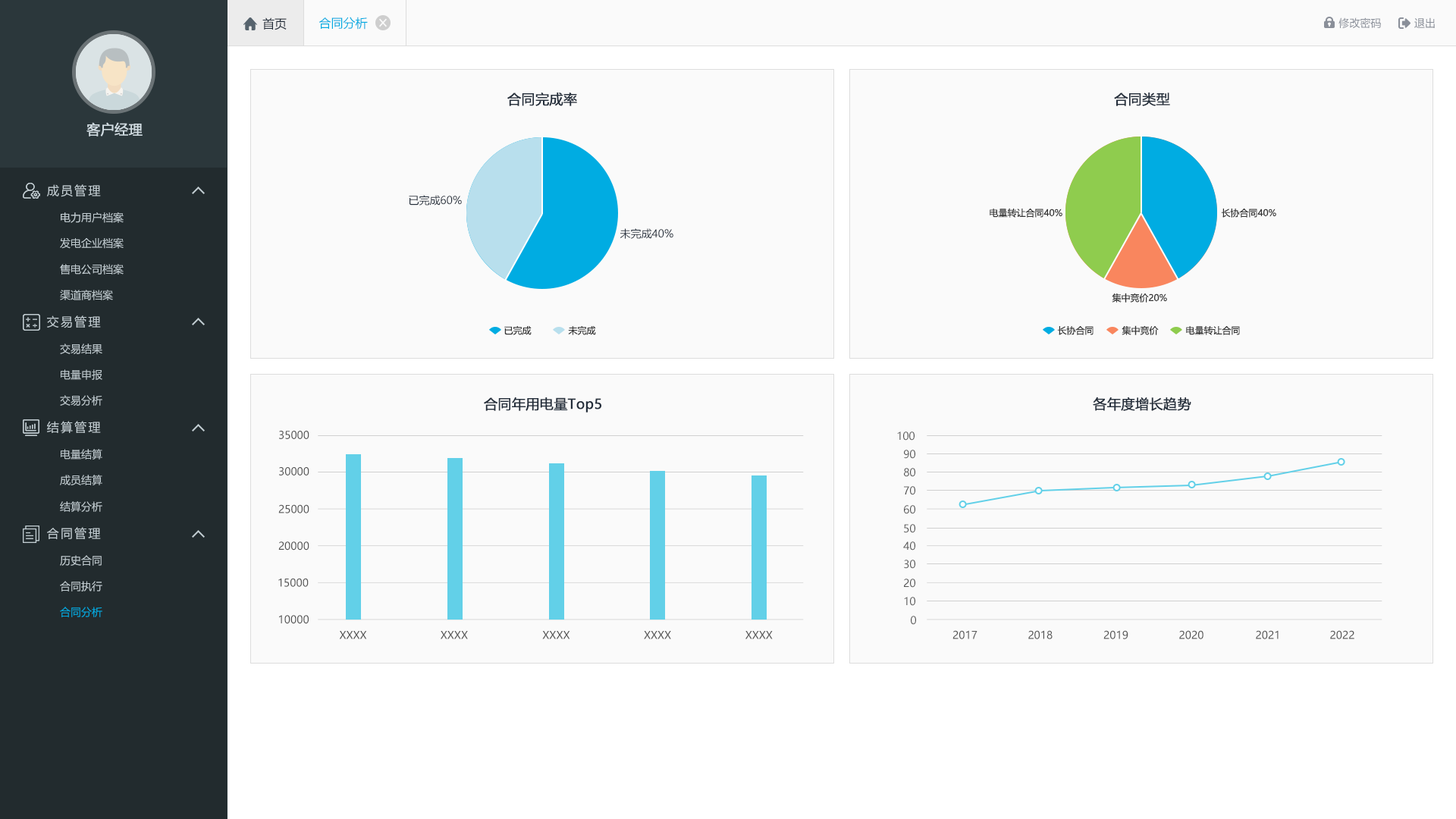
<style>
.page{position:relative;width:1456px;height:819px;background:#fafafa}
.page>*{position:absolute;margin:0}
.t1{font:12.1px "MicrosoftYaHei";color:#242e3b}
.t2{font:12.1px "MicrosoftYaHei";color:#00ace2}
.t3{font:10.6px "MicrosoftYaHei";color:#8a8f99}
.t4{font:13.6px "MicrosoftYaHei";color:#242e3b;font-weight:bold}
.t5{font:13.6px "MicrosoftYaHei";color:#d1dce2;font-weight:bold}
.t6{font:12.1px "MicrosoftYaHei";letter-spacing:0.14em;color:#c2cdd2}
.t7{font:10.6px "MicrosoftYaHei";color:#242e3b}
.t8{font:9.1px "MicrosoftYaHei";color:#333333}
.t9{font:10.6px "MicrosoftYaHei";color:#c2cdd2}
.t10{font:10.6px "MicrosoftYaHei";color:#555555}
.t11{font:10.6px "MicrosoftYaHei";color:#00ace2}
</style>
<div class="page">
<p class="t1" style="left:262px;top:17px;width:25px;height:13px">首页</p>
<p class="t2" style="left:318px;top:17px;width:50px;height:13px">合同分析</p>
<p class="t3" style="left:1338px;top:17px;width:43px;height:12px">修改密码</p>
<p class="t3" style="left:1414px;top:17px;width:21px;height:11px">退出</p>
<p class="t4" style="left:507px;top:93px;width:70px;height:13px">合同完成率</p>
<p class="t4" style="left:1114px;top:93px;width:56px;height:13px">合同类型</p>
<p class="t5" style="left:86px;top:122px;width:57px;height:14px">客户经理</p>
<p class="t6" style="left:47px;top:184px;width:54px;height:13px">成员管理</p>
<p class="t7" style="left:409px;top:195px;width:53px;height:11px">已完成60%</p>
<p class="t8" style="left:990px;top:208px;width:72px;height:10px">电量转让合同40%</p>
<p class="t8" style="left:1221px;top:209px;width:55px;height:9px">长协合同40%</p>
<p class="t9" style="left:61px;top:212px;width:63px;height:11px">电力用户档案</p>
<p class="t7" style="left:620px;top:228px;width:53px;height:11px">未完成40%</p>
<p class="t9" style="left:60px;top:237px;width:64px;height:12px">发电企业档案</p>
<p class="t9" style="left:60px;top:264px;width:64px;height:11px">售电公司档案</p>
<p class="t9" style="left:60px;top:290px;width:53px;height:10px">渠道商档案</p>
<p class="t8" style="left:1112px;top:293px;width:55px;height:10px">集中竞价20%</p>
<p class="t6" style="left:47px;top:315px;width:54px;height:13px">交易管理</p>
<p class="t8" style="left:504px;top:325px;width:28px;height:10px">已完成</p>
<p class="t8" style="left:568px;top:325px;width:28px;height:10px">未完成</p>
<p class="t8" style="left:1057px;top:326px;width:37px;height:9px">长协合同</p>
<p class="t8" style="left:1122px;top:325px;width:37px;height:10px">集中竞价</p>
<p class="t8" style="left:1186px;top:325px;width:54px;height:10px">电量转让合同</p>
<p class="t9" style="left:60px;top:344px;width:42px;height:10px">交易结果</p>
<p class="t9" style="left:61px;top:369px;width:41px;height:11px">电量申报</p>
<p class="t9" style="left:60px;top:395px;width:42px;height:11px">交易分析</p>
<p class="t4" style="left:484px;top:397px;width:117px;height:16px">合同年用电量Top5</p>
<p class="t4" style="left:1093px;top:397px;width:98px;height:14px">各年度增长趋势</p>
<p class="t6" style="left:47px;top:421px;width:54px;height:13px">结算管理</p>
<p class="t10" style="left:279px;top:431px;width:30px;height:8px">35000</p>
<p class="t10" style="left:897px;top:431px;width:18px;height:10px">100</p>
<p class="t9" style="left:61px;top:449px;width:41px;height:11px">电量结算</p>
<p class="t10" style="left:904px;top:450px;width:11px;height:9px">90</p>
<p class="t10" style="left:279px;top:467px;width:30px;height:8px">30000</p>
<p class="t10" style="left:904px;top:468px;width:11px;height:9px">80</p>
<p class="t9" style="left:60px;top:475px;width:42px;height:10px">成员结算</p>
<p class="t10" style="left:904px;top:486px;width:11px;height:9px">70</p>
<p class="t9" style="left:60px;top:501px;width:42px;height:11px">结算分析</p>
<p class="t10" style="left:278px;top:504px;width:31px;height:9px">25000</p>
<p class="t10" style="left:904px;top:505px;width:11px;height:9px">60</p>
<p class="t6" style="left:47px;top:527px;width:54px;height:12px">合同管理</p>
<p class="t10" style="left:904px;top:524px;width:11px;height:9px">50</p>
<p class="t10" style="left:278px;top:541px;width:31px;height:10px">20000</p>
<p class="t10" style="left:903px;top:541px;width:12px;height:10px">40</p>
<p class="t9" style="left:60px;top:555px;width:42px;height:11px">历史合同</p>
<p class="t10" style="left:904px;top:560px;width:11px;height:9px">30</p>
<p class="t9" style="left:60px;top:581px;width:42px;height:10px">合同执行</p>
<p class="t10" style="left:278px;top:578px;width:31px;height:9px">15000</p>
<p class="t10" style="left:904px;top:579px;width:11px;height:9px">20</p>
<p class="t10" style="left:904px;top:597px;width:11px;height:9px">10</p>
<p class="t11" style="left:60px;top:607px;width:42px;height:10px">合同分析</p>
<p class="t10" style="left:279px;top:615px;width:30px;height:9px">10000</p>
<p class="t10" style="left:911px;top:616px;width:5px;height:9px">0</p>
<p class="t10" style="left:339px;top:631px;width:28px;height:8px">XXXX</p>
<p class="t10" style="left:441px;top:631px;width:27px;height:8px">XXXX</p>
<p class="t10" style="left:542px;top:631px;width:28px;height:8px">XXXX</p>
<p class="t10" style="left:644px;top:631px;width:27px;height:8px">XXXX</p>
<p class="t10" style="left:745px;top:631px;width:28px;height:8px">XXXX</p>
<p class="t10" style="left:952px;top:630px;width:25px;height:9px">2017</p>
<p class="t10" style="left:1028px;top:630px;width:25px;height:9px">2018</p>
<p class="t10" style="left:1103px;top:630px;width:25px;height:9px">2019</p>
<p class="t10" style="left:1179px;top:630px;width:24px;height:9px">2020</p>
<p class="t10" style="left:1256px;top:630px;width:23px;height:9px">2021</p>
<p class="t10" style="left:1330px;top:630px;width:24px;height:9px">2022</p>
</div>
